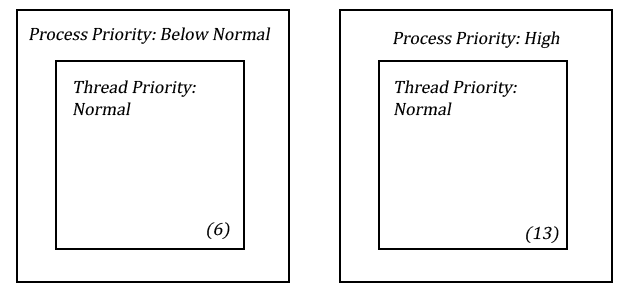
<style>
.page{position:relative;width:633px;height:295px;background:#ffffff}
.page>*{position:absolute;margin:0}
.t1{font:18px "CambriaMath";color:#000000;font-style:italic}
</style>
<div class="page">
<p class="t1" style="left:29px;top:27px;width:242px;height:17px">Process Priority: Below Normal</p>
<p class="t1" style="left:393px;top:31px;width:167px;height:18px">Process Priority: High</p>
<p class="t1" style="left:73px;top:80px;width:123px;height:36px">Thread Priority:<br>Normal</p>
<p class="t1" style="left:394px;top:80px;width:123px;height:36px">Thread Priority:<br>Normal</p>
<p class="t1" style="left:207px;top:222px;width:23px;height:17px">(6)</p>
<p class="t1" style="left:526px;top:226px;width:33px;height:17px">(13)</p>
</div>
